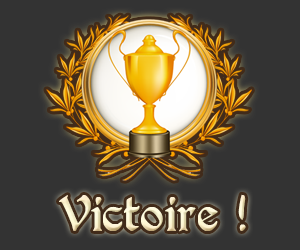
<style>
.page{position:relative;width:300px;height:250px;background:#333333}
.page>*{position:absolute;margin:0}
.t1{font:36px "PerryGothic"}
</style>
<div class="page">
<p class="t1" style="left:59px;top:194px;width:187px;height:38px">Victoire !</p>
</div>
